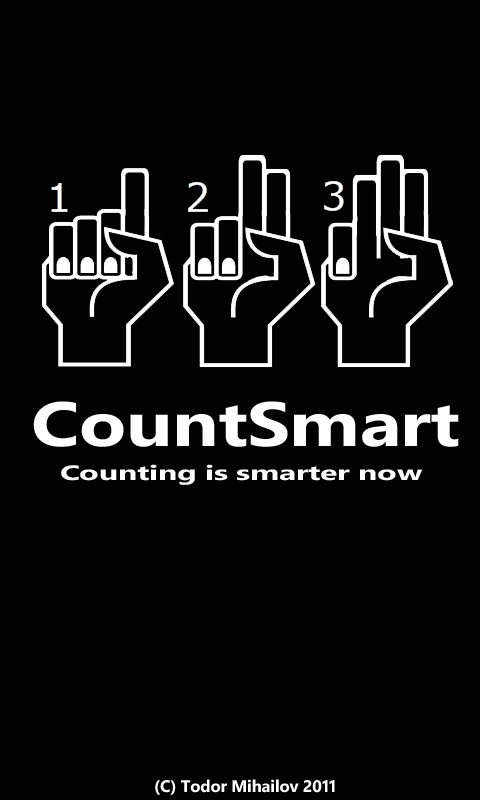
<style>
.page{position:relative;width:480px;height:800px;background:#020202}
.page>*{position:absolute;margin:0}
.t1{font:62.5px "SegoeWP-Bold";letter-spacing:-0.01em;color:#ffffff;scale:1.24 1}
.t2{font:20.8px "SegoeWP-Bold";letter-spacing:-0.01em;color:#ffffff;scale:1.54 1}
.t3{font:16.7px "SegoeWP-Bold";letter-spacing:-0.01em;color:#fefffe}
</style>
<div class="page">
<p class="t1" style="left:33px;top:401px;width:426px;height:46px">CountSmart</p>
<p class="t2" style="left:61px;top:464px;width:362px;height:21px">Counting is smarter now</p>
<p class="t3" style="left:155px;top:779px;width:180px;height:16px">(C) Todor Mihailov 2011</p>
</div>
